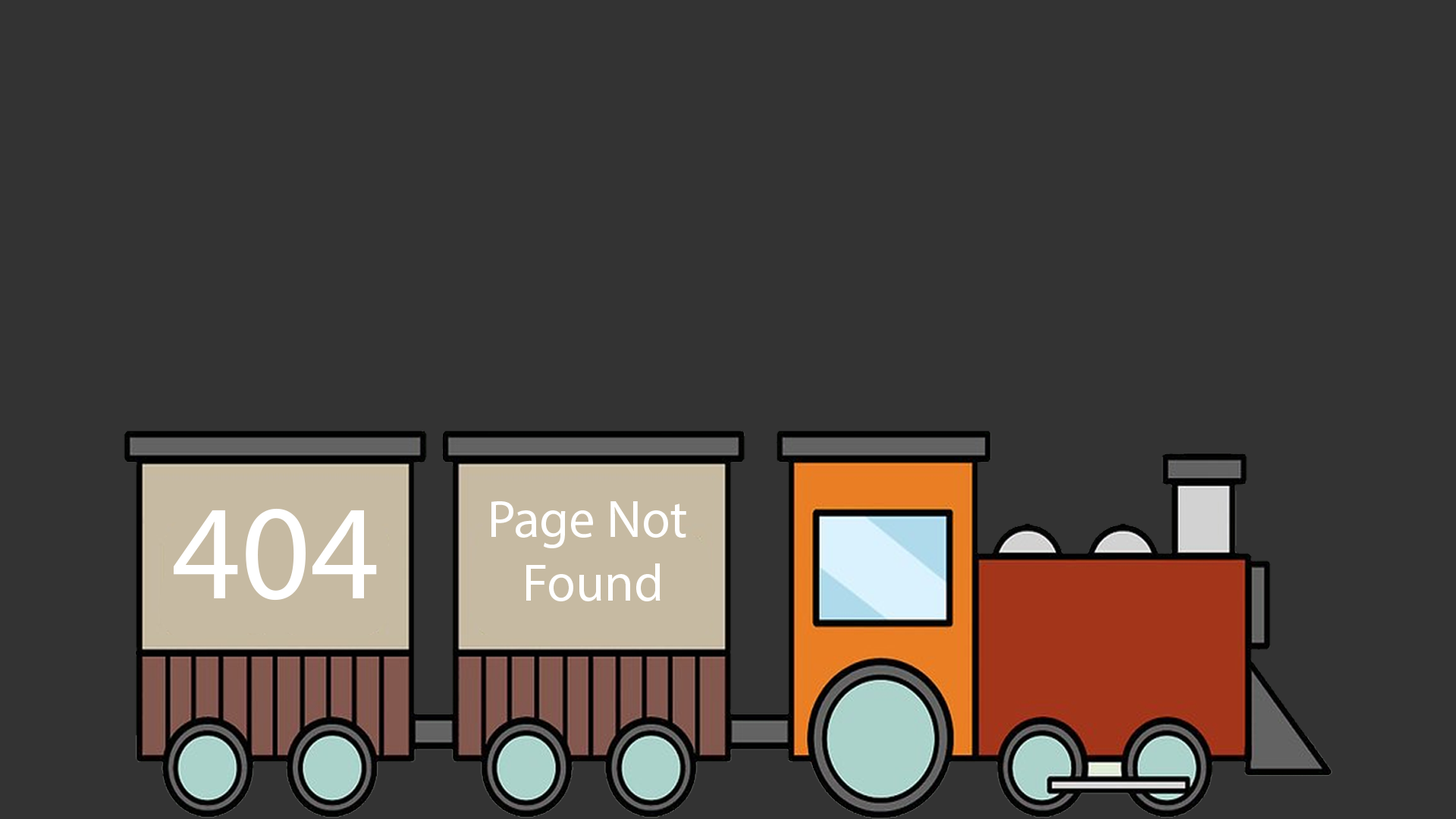
<style>
.page{position:relative;width:1456px;height:819px;background:#333333}
.page>*{position:absolute;margin:0}
.t1{font:135.3px "MyriadPro-Regular";color:#ffffff}
.t2{font:52.8px "MyriadPro-Regular";color:#ffffff}
</style>
<div class="page">
<p class="t1" style="left:174px;top:508px;width:203px;height:93px">404</p>
<p class="t2" style="left:491px;top:501px;width:195px;height:100px;text-align:center">Page Not <br>Found</p>
</div>
